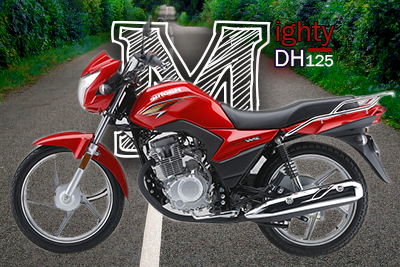
<style>
.page{position:relative;width:400px;height:267px}
.page>*{position:absolute;margin:0}
.t1{font:193px "FineCollege"}
.t2{font:30px "FranklinGothic-Book";color:#a2110c}
.t3{font:24.1px "FranklinGothic-Book";color:#ffffff}
.t4{font:16.3px "FranklinGothic-Book";color:#ffffff}
</style>
<div class="page">
<p class="t1" style="left:111px;top:20px;width:160px;height:138px">m</p>
<p class="t2" style="left:276px;top:21px;width:58px;height:25px">ighty</p>
<p class="t3" style="left:275px;top:49px;width:29px;height:18px">DH</p>
<p class="t4" style="left:306px;top:54px;width:28px;height:13px">125</p>
</div>
